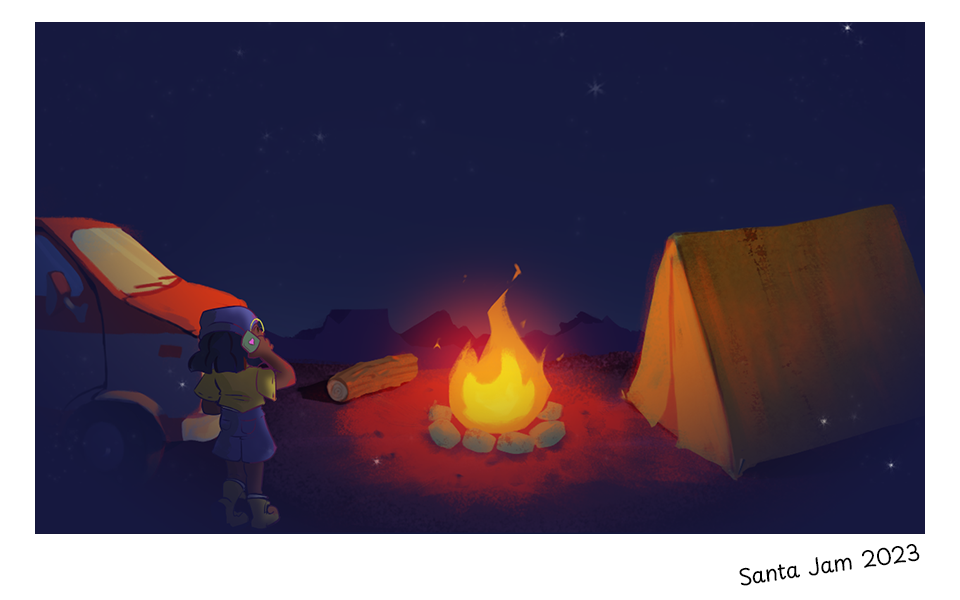
<style>
.page{position:relative;width:960px;height:600px}
.page>*{position:absolute;margin:0}
.t1{font:22.2px "PlaypenSans-Regular";letter-spacing:-0.025em;color:#000000}
</style>
<div class="page">
<p class="t1" style="left:739px;top:544px;width:181px;height:42px;rotate:-8deg">Santa Jam 2023</p>
</div>
